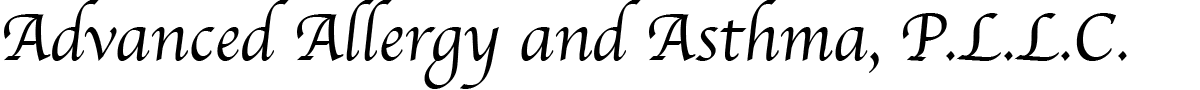
<style>
.page{position:relative;width:1200px;height:90px;background:#ffffff}
.page>*{position:absolute;margin:0}
.t1{font:69.6px "Apple-Chancery";color:#000000}
</style>
<div class="page">
<p class="t1" style="left:4px;top:0px;width:1123px;height:89px">Advanced Allergy and Asthma, P.L.L.C.</p>
</div>
